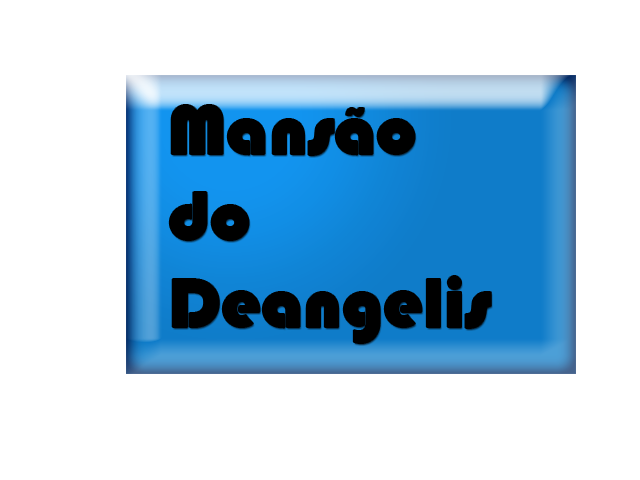
<style>
.page{position:relative;width:640px;height:480px;background:#ffffff}
.page>*{position:absolute;margin:0}
.t1{font:72px "Bauhaus93";color:#000000}
</style>
<div class="page">
<p class="t1" style="left:169px;top:105px;width:322px;height:238px">Mansão<br>do<br>Deangelis</p>
</div>
